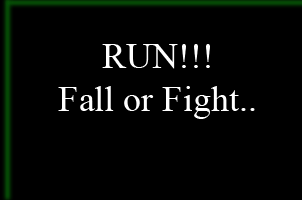
<style>
.page{position:relative;width:302px;height:200px;background:#000000}
.page>*{position:absolute;margin:0}
.t1{font:36px "TimesNewRomanPSMT";color:#ffffff}
</style>
<div class="page">
<p class="t1" style="left:58px;top:44px;width:197px;height:75px;text-align:center">RUN!!!<br>Fall or Fight..</p>
</div>
